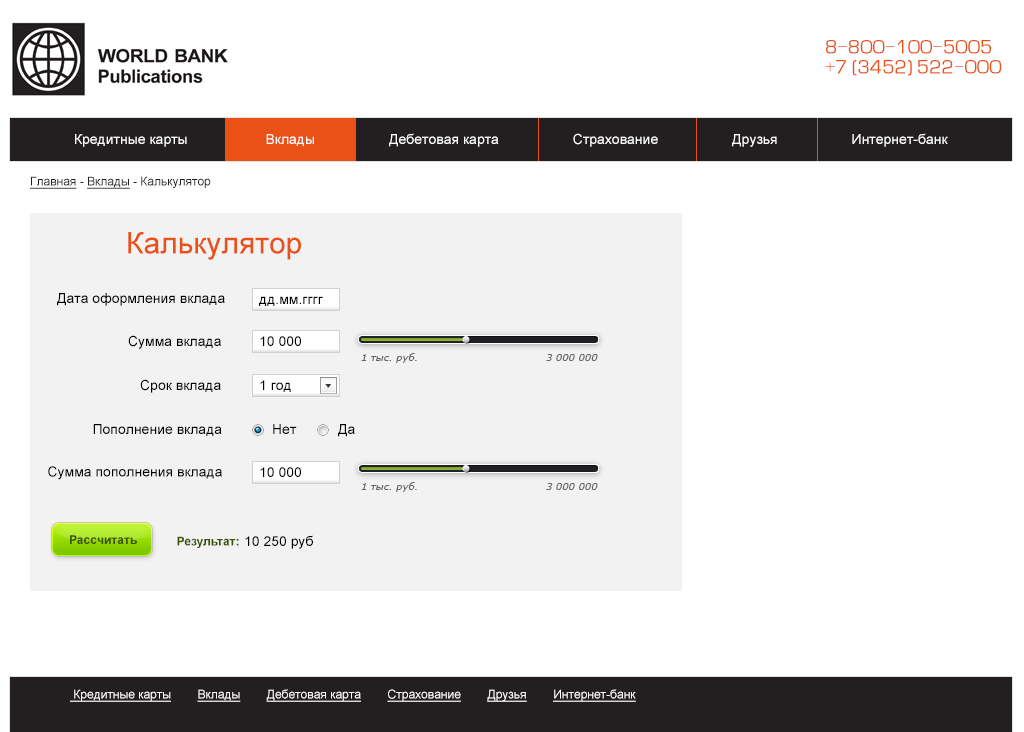
<style>
.page{position:relative;width:1024px;height:732px;background:#ffffff}
.page>*{position:absolute;margin:0}
.t1{font:18px/20px "Europe";color:#eb5017}
.t2{font:14px "ArialMT";color:#ffffff}
.t3{font:12px "ArialMT";color:#231f20}
.t4{font:12px "ArialMT";color:#231f20;text-decoration:underline}
.t5{font:30px "ArialMT";color:#eb5017}
.t6{font:14px "ArialMT";color:#000000}
.t7{font:10px "Verdana-Italic";color:#676767}
.t8{font:12px "Arial-BoldMT";color:#395306}
.t9{font:12px "ArialMT";color:#ffffff;text-decoration:underline}
</style>
<div class="page">
<p class="t1" style="left:825px;top:40px;width:177px;height:36px">8-800-100-5005<br>+7 (3452) 522-000</p>
<p class="t2" style="left:75px;top:133px;width:873px;height:14px">Кредитные карты                    Вклады                   Дебетовая карта                   Страхование                   Друзья                   Интернет-банк</p>
<p class="t3" style="left:30px;top:176px;width:181px;height:13px"><span class="t4">Главная</span> - <span class="t4">Вклады</span> - Калькулятор</p>
<p class="t5" style="left:128px;top:232px;width:173px;height:28px">Калькулятор</p>
<p class="t6" style="left:57px;top:293px;width:168px;height:13px">Дата оформления вклада</p>
<p class="t6" style="left:259px;top:296px;width:64px;height:10px">дд.мм.гггг</p>
<p class="t6" style="left:128px;top:335px;width:93px;height:14px">Сумма вклада</p>
<p class="t6" style="left:260px;top:336px;width:41px;height:10px">10 000</p>
<p class="t7" style="left:361px;top:353px;width:56px;height:10px">1 тыс. руб.</p>
<p class="t7" style="left:546px;top:354px;width:52px;height:7px">3 000 000</p>
<p class="t6" style="left:140px;top:379px;width:81px;height:14px">Срок вклада</p>
<p class="t6" style="left:260px;top:380px;width:31px;height:12px">1 год</p>
<p class="t6" style="left:93px;top:424px;width:129px;height:12px">Пополнение вклада</p>
<p class="t6" style="left:273px;top:424px;width:24px;height:10px">Нет</p>
<p class="t6" style="left:338px;top:424px;width:17px;height:13px">Да</p>
<p class="t6" style="left:48px;top:466px;width:174px;height:14px">Сумма пополнения вклада</p>
<p class="t6" style="left:260px;top:467px;width:41px;height:10px">10 000</p>
<p class="t7" style="left:361px;top:482px;width:56px;height:10px">1 тыс. руб.</p>
<p class="t7" style="left:546px;top:483px;width:52px;height:7px">3 000 000</p>
<p class="t8" style="left:70px;top:535px;width:67px;height:9px">Рассчитать</p>
<p class="t8" style="left:177px;top:536px;width:62px;height:12px">Результат:</p>
<p class="t6" style="left:245px;top:535px;width:68px;height:14px">10 250 руб</p>
<p class="t9" style="left:70px;top:689px;width:566px;height:13px">Кредитные карты        Вклады        Дебетовая карта        Страхование        Друзья        Интернет-банк</p>
</div>
